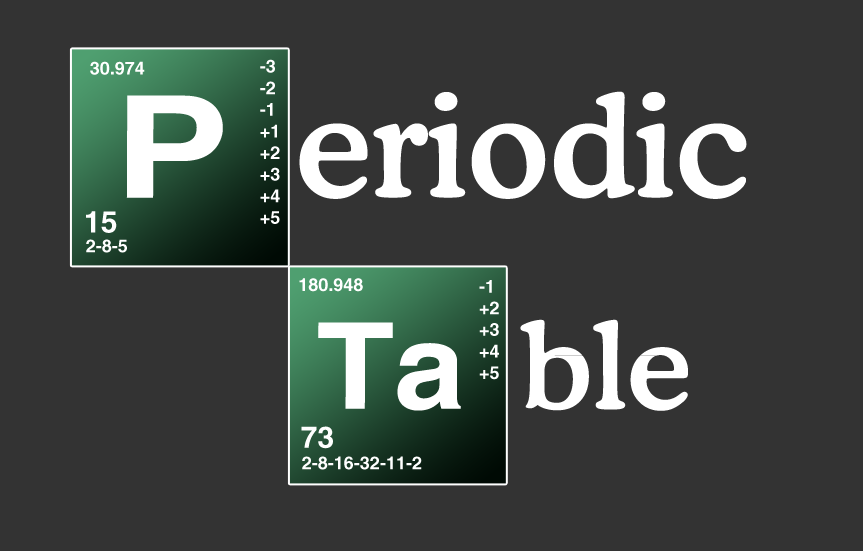
<style>
.page{position:relative;width:863px;height:551px;background:#333333}
.page>*{position:absolute;margin:0}
.t1{font:18px "Helvetica-Bold";color:#ffffff}
.t2{font:141.9px "Helvetica-Bold";color:#ffffff;scale:1.22 1}
.t3{font:141.8px "CooperBT-Medium";color:#ffffff}
.t4{font:30px "Helvetica-Bold";color:#ffffff}
.t5{font:119.8px "Helvetica-Bold";color:#ffffff;scale:1.06 1}
.t6{font:119.8px "CooperBT-Medium";color:#ffffff}
</style>
<div class="page">
<p class="t1" style="left:90px;top:61px;width:55px;height:14px">30.974</p>
<p class="t1" style="left:260px;top:59px;width:20px;height:165px">-3<br>-2<br>-1<br>+1<br>+2<br>+3<br>+4<br>+5</p>
<p class="t2" style="left:126px;top:95px;width:97px;height:103px">P</p>
<p class="t3" style="left:299px;top:91px;width:448px;height:108px">eriodic</p>
<p class="t4" style="left:86px;top:211px;width:31px;height:22px">15</p>
<p class="t1" style="left:86px;top:239px;width:41px;height:14px">2-8-5</p>
<p class="t1" style="left:299px;top:278px;width:64px;height:14px">180.948</p>
<p class="t1" style="left:479px;top:280px;width:20px;height:100px">-1<br>+2<br>+3<br>+4<br>+5</p>
<p class="t5" style="left:318px;top:322px;width:143px;height:89px">Ta</p>
<p class="t6" style="left:520px;top:319px;width:168px;height:92px">ble</p>
<p class="t4" style="left:301px;top:426px;width:32px;height:23px">73</p>
<p class="t1" style="left:302px;top:456px;width:120px;height:14px">2-8-16-32-11-2</p>
</div>
